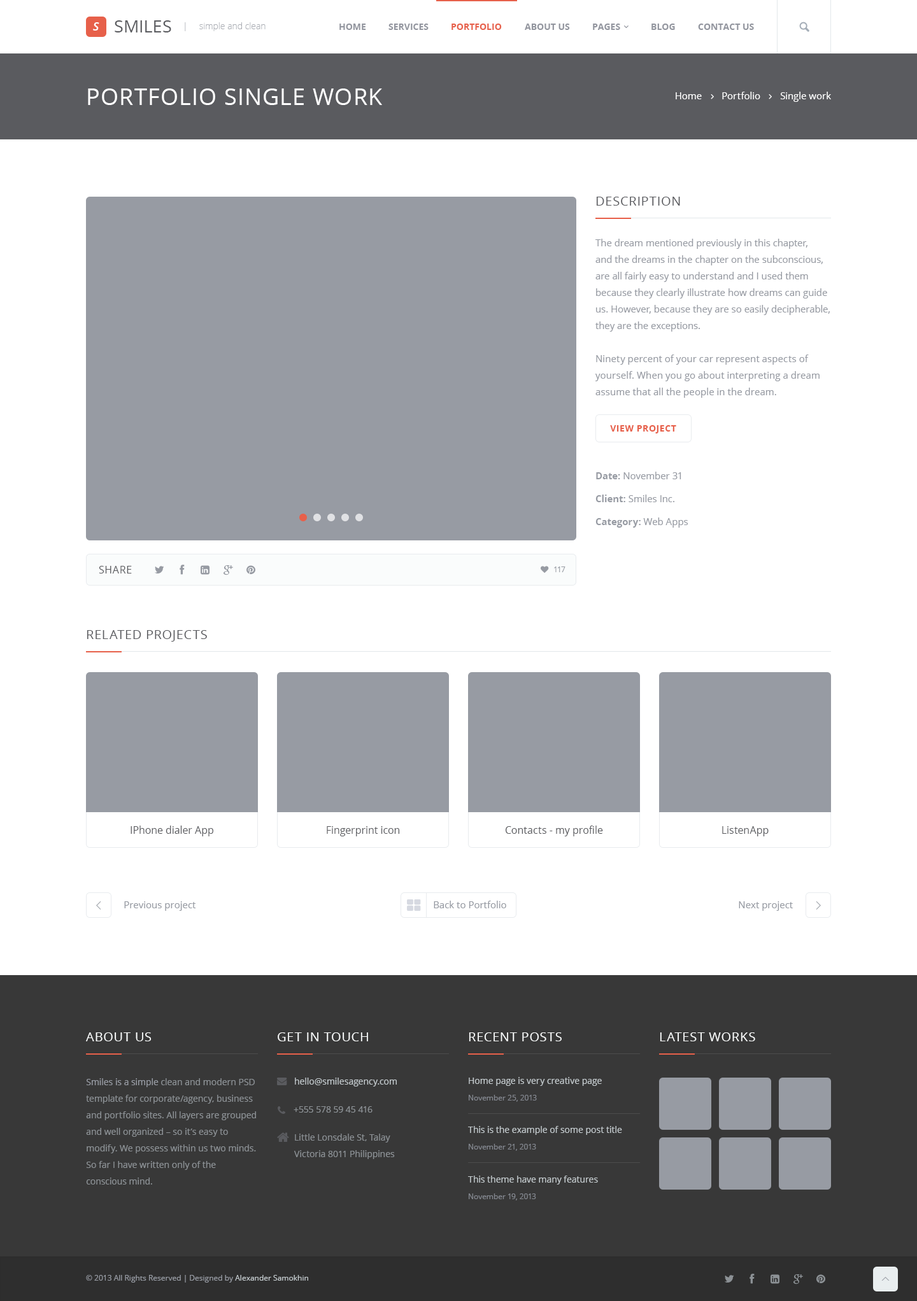
<style>
.page{position:relative;width:917px;height:1301px;background:#ffffff}
.page>*{position:absolute;margin:0}
.t1{font:11.5px "OpenSans-SemiboldItalic";color:#ffffff}
.t2{font:17.2px "OpenSans";color:#5a5b5f}
.t3{font:8.9px "OpenSans-Light";color:#abaeb5}
.t4{font:8.9px "OpenSans-Bold";color:#93969f}
.t5{font:8.9px "OpenSans-Bold";color:#e7604a}
.t6{font:22.9px "OpenSans";letter-spacing:0.04em;color:#ffffff}
.t7{font:9.5px "OpenSans";color:#ffffff}
.t8{font:12.7px "OpenSans";letter-spacing:0.04em;color:#5a5b5f}
.t9{font:9.5px/16.5px "OpenSans";color:#979ba3}
.t10{font:8.9px "OpenSans-Bold";letter-spacing:0.04em;color:#e7604a}
.t11{font:9.5px/22.9px "OpenSans";color:#979ba3}
.t12{font:9.5px/22.9px "OpenSans-Bold";color:#979ba3}
.t13{font:10.2px "OpenSans";letter-spacing:0.04em;color:#5a5b5f;text-transform:uppercase}
.t14{font:7.6px "OpenSans";color:#979ba3}
.t15{font:10.2px "OpenSans";color:#5a5b5f}
.t16{font:9.5px "OpenSans";color:#979ba3}
.t17{font:12.7px "OpenSans";letter-spacing:0.04em;color:#fafcfc}
.t18{font:8.9px/16.5px "OpenSans";color:#8c9195}
.t19{font:8.9px/16.5px "OpenSans";color:#979ba3}
.t20{font:8.9px "OpenSans";color:#c2c9cc}
.t21{font:8.9px/16.5px "OpenSans";color:#c2c9cc}
.t22{font:7.6px/16.5px "OpenSans";color:#848890}
.t23{font:8.9px "OpenSans";color:#8c9195}
.t24{font:7.6px "OpenSans";color:#c2c9cc}
</style>
<div class="page">
<p class="t1" style="left:93px;top:22px;width:6px;height:9px">S</p>
<p class="t2" style="left:115px;top:20px;width:56px;height:12px">SMILES</p>
<p class="t3" style="left:185px;top:22px;width:80px;height:9px">|     simple and clean</p>
<p class="t4" style="left:339px;top:24px;width:27px;height:6px">HOME</p>
<p class="t4" style="left:388px;top:24px;width:40px;height:6px">SERVICES</p>
<p class="t5" style="left:451px;top:24px;width:51px;height:6px">PORTFOLIO</p>
<p class="t4" style="left:524px;top:24px;width:46px;height:6px">ABOUT US</p>
<p class="t4" style="left:593px;top:24px;width:27px;height:6px">PAGES</p>
<p class="t4" style="left:651px;top:24px;width:24px;height:6px">BLOG</p>
<p class="t4" style="left:698px;top:24px;width:56px;height:6px">CONTACT US</p>
<p class="t6" style="left:88px;top:88px;width:294px;height:17px">PORTFOLIO SINGLE WORK</p>
<p class="t7" style="left:675px;top:92px;width:156px;height:10px">Home        Portfolio        Single work</p>
<p class="t8" style="left:596px;top:197px;width:84px;height:9px">DESCRIPTION</p>
<p class="t9" style="left:595px;top:239px;width:234px;height:159px">The dream mentioned previously in this chapter, and the dreams in the chapter on the subconscious, are all fairly easy to understand and I used them because they clearly illustrate how dreams can guide us. However, because they are so easily decipherable, they are the exceptions. <br><br>Ninety percent of your car represent aspects of yourself. When you go about interpreting a dream assume that all the people in the dream.</p>
<p class="t10" style="left:610px;top:425px;width:66px;height:8px">VIEW PROJECT</p>
<p class="t11" style="left:595px;top:472px;width:93px;height:56px"><span class="t12">Date: </span>November 31<br><span class="t12">Client: </span>Smiles Inc.<br><span class="t12">Category: </span>Web Apps</p>
<p class="t13" style="left:99px;top:566px;width:33px;height:7px">Share</p>
<p class="t14" style="left:554px;top:566px;width:11px;height:6px">117</p>
<p class="t8" style="left:87px;top:630px;width:120px;height:12px">RELATED PROJECTS</p>
<p class="t15" style="left:130px;top:826px;width:83px;height:10px">IPhone dialer App</p>
<p class="t15" style="left:327px;top:826px;width:73px;height:10px">Fingerprint icon</p>
<p class="t15" style="left:505px;top:826px;width:98px;height:10px">Contacts - my profile</p>
<p class="t15" style="left:722px;top:826px;width:46px;height:10px">ListenApp</p>
<p class="t16" style="left:124px;top:901px;width:72px;height:10px">Previous project</p>
<p class="t16" style="left:433px;top:901px;width:73px;height:7px">Back to Portfolio</p>
<p class="t16" style="left:738px;top:901px;width:54px;height:10px">Next project</p>
<p class="t17" style="left:86px;top:1032px;width:65px;height:9px">ABOUT US</p>
<p class="t17" style="left:278px;top:1032px;width:90px;height:9px">GET IN TOUCH</p>
<p class="t17" style="left:468px;top:1032px;width:93px;height:9px">RECENT POSTS</p>
<p class="t17" style="left:659px;top:1032px;width:96px;height:9px">LATEST WORKS</p>
<p class="t18" style="left:86px;top:1078px;width:170px;height:107px"><span class="t19">Smiles is a simple</span> clean and modern PSD template for corporate/agency, business and portfolio sites. All layers are grouped and well organized – so it’s easy to modify. We possess within us two minds. So far I have written only of the conscious mind.</p>
<p class="t20" style="left:295px;top:1078px;width:102px;height:8px">hello@smilesagency.com</p>
<p class="t21" style="left:468px;top:1077px;width:133px;height:25px">Home page is very creative page<br><span class="t22">November 25, 2013</span></p>
<p class="t23" style="left:293px;top:1106px;width:79px;height:7px">+555 578 59 45 416</p>
<p class="t18" style="left:294px;top:1134px;width:101px;height:25px">Little Lonsdale St, Talay<br>Victoria 8011 Philippines</p>
<p class="t21" style="left:468px;top:1126px;width:154px;height:25px">This is the example of some post title<br><span class="t22">November 21, 2013</span></p>
<p class="t21" style="left:468px;top:1176px;width:130px;height:24px">This theme have many features<br><span class="t22">November 19, 2013</span></p>
<p class="t14" style="left:86px;top:1275px;width:222px;height:8px">© 2013 All Rights Reserved | Designed by <span class="t24">Alexander Samokhin</span></p>
</div>
